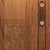
<style>
.page{position:relative;width:50px;height:50px}
.page>*{position:absolute;margin:0}
.t1{font:13px "GillSans";color:#946548}
.t2{font:13px "GillSans";color:#8c6045}
</style>
<div class="page">
<p class="t1" style="left:5px;top:25px;width:15px;height:9px">E S</p>
<p class="t2" style="left:4px;top:40px;width:20px;height:9px">v1.1</p>
</div>
